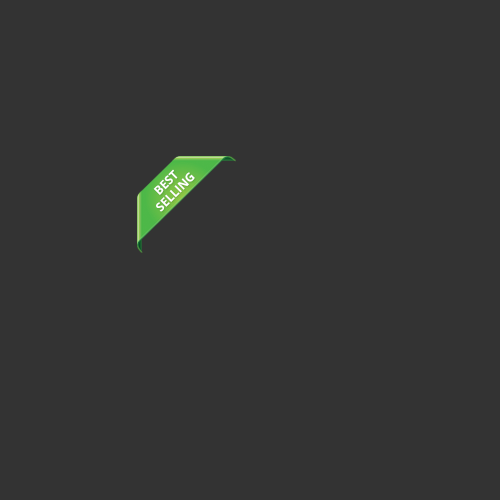
<style>
.page{position:relative;width:500px;height:500px;background:#333333}
.page>*{position:absolute;margin:0}
.t1{font:12px/8px "OpenSans-Bold";color:#ffffff;text-transform:uppercase}
</style>
<div class="page">
<p class="t1" style="left:153px;top:169px;width:42px;height:43px;text-align:center;rotate:-45deg">best<br>selling</p>
</div>
